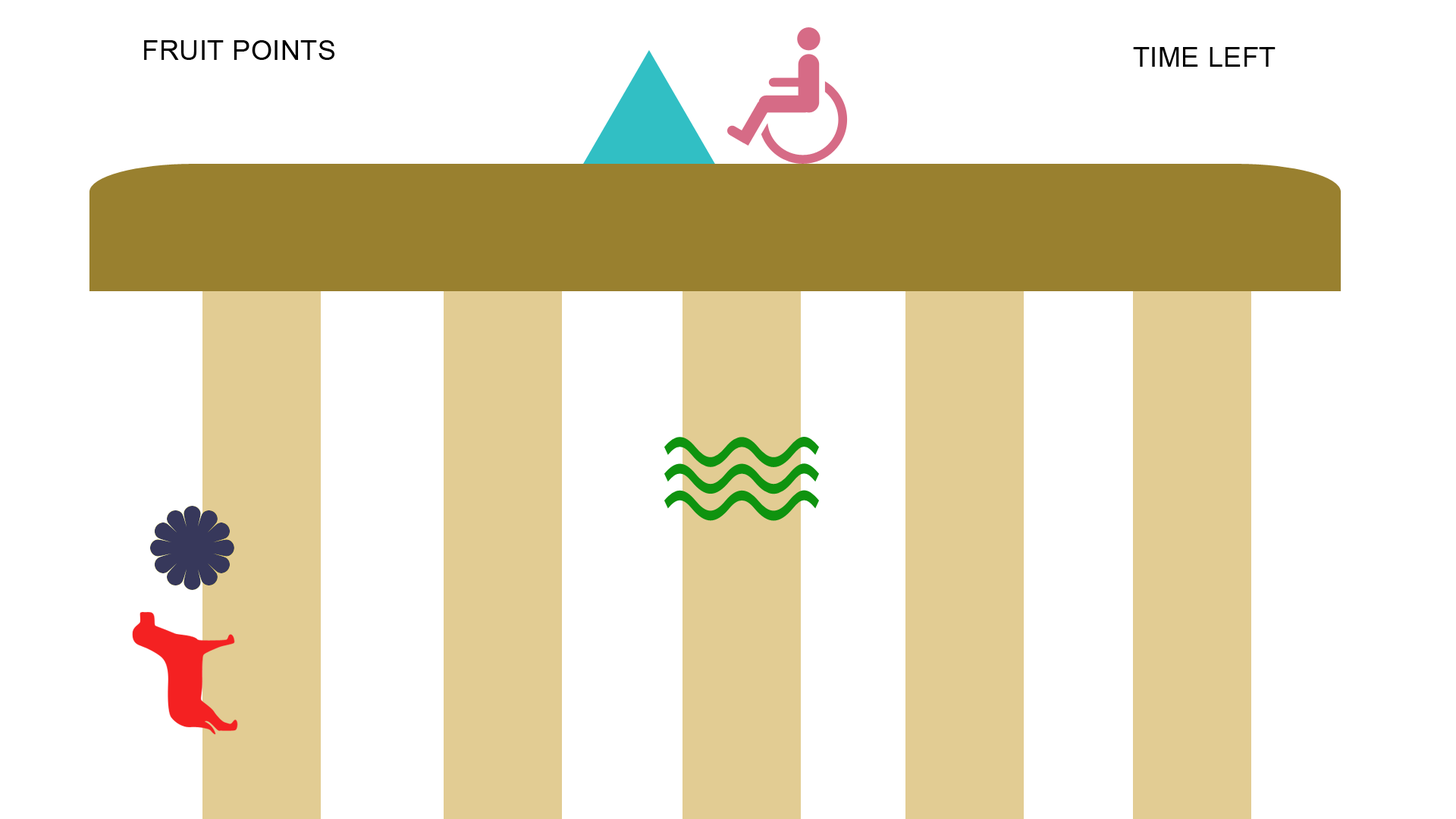
<style>
.page{position:relative;width:1456px;height:819px;background:#ffffff}
.page>*{position:absolute;margin:0}
.t1{font:27.3px "ArialMT";letter-spacing:0.015em;color:#000000}
</style>
<div class="page">
<p class="t1" style="left:144px;top:40px;width:190px;height:20px">FRUIT POINTS</p>
<p class="t1" style="left:1133px;top:47px;width:142px;height:20px">TIME LEFT</p>
</div>
